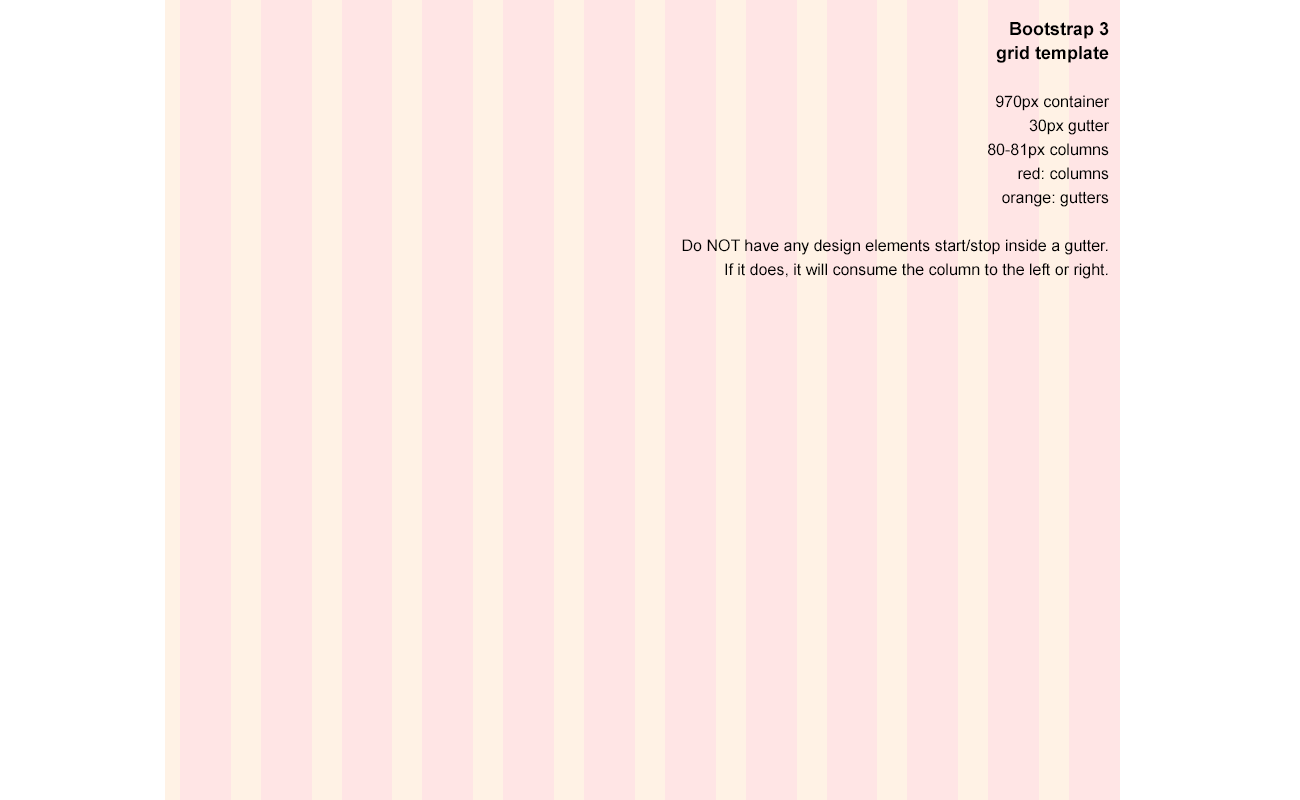
<style>
.page{position:relative;width:1300px;height:800px;background:#ffe5e5}
.page>*{position:absolute;margin:0}
.t1{font:16px/24px "ArialMT";color:#000000}
.t2{font:18px/24px "Arial-BoldMT";color:#000000}
</style>
<div class="page">
<p class="t1" style="left:682px;top:22px;width:428px;height:257px;text-align:right"><span class="t2">Bootstrap 3<br>grid template<br><br></span>970px container<br>30px gutter<br>80-81px columns<br>red: columns<br>orange: gutters<br><br>Do NOT have any design elements start/stop inside a gutter. If it does, it will consume the column to the left or right.</p>
</div>
